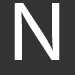
<style>
.page{position:relative;width:75px;height:75px;background:#333333}
.page>*{position:absolute;margin:0}
.t1{font:84.2px "MyriadPro-Regular";color:#ffffff;scale:1.05 1}
</style>
<div class="page">
<p class="t1" style="left:14px;top:3px;width:46px;height:57px">N</p>
</div>
